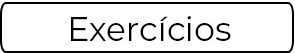
<style>
.page{position:relative;width:295px;height:53px;background:#ffffff}
.page>*{position:absolute;margin:0}
.t1{font:33.3px "Montserrat-Regular";color:#000000}
</style>
<div class="page">
<p class="t1" style="left:71px;top:16px;width:160px;height:25px">Exercícios</p>
</div>
